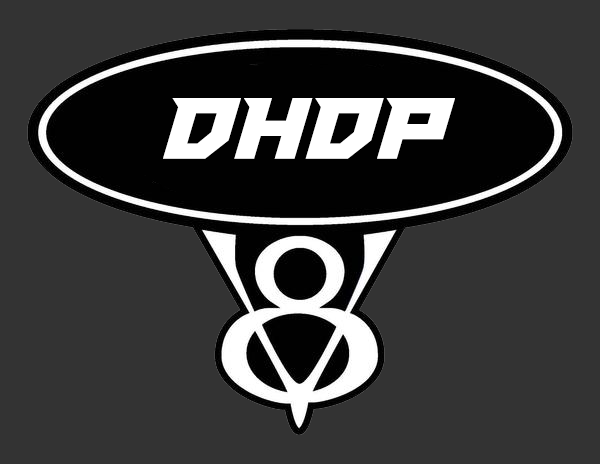
<style>
.page{position:relative;width:600px;height:464px;background:#333333}
.page>*{position:absolute;margin:0}
.t1{font:93.6px "Paladins";color:#ffffff;scale:0.77 1}
</style>
<div class="page">
<p class="t1" style="left:163px;top:98px;width:292px;height:61px">DHDP</p>
</div>
